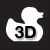
<style>
.page{position:relative;width:50px;height:50px;background:#231f20}
.page>*{position:absolute;margin:0}
.t1{font:16.7px "AlteHaasGrotesk_Bold";color:#000000}
</style>
<div class="page">
<p class="t1" style="left:15px;top:26px;width:21px;height:13px">3D</p>
</div>
